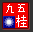
<style>
.page{position:relative;width:33px;height:32px;background:#f20000}
.page>*{position:absolute;margin:0}
.t1{font:10.4px "SimSun";color:#ffffff}
.t2{font:11.7px "SimSun";color:#ffffff}
</style>
<div class="page">
<p class="t1" style="left:6px;top:4px;width:19px;height:9px">九五</p>
<p class="t2" style="left:16px;top:15px;width:11px;height:12px">桂</p>
</div>
